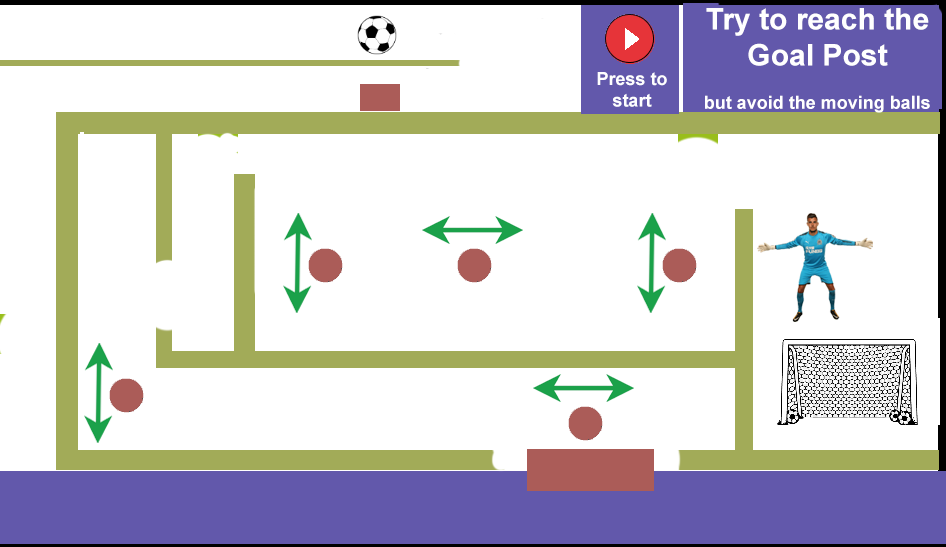
<style>
.page{position:relative;width:946px;height:547px;background:#ffffff}
.page>*{position:absolute;margin:0}
.t1{font:30px "Arial-BoldMT";color:#ffffff}
.t2{font:18px "Arial-BoldMT";color:#ffffff}
.t3{font:18px "Arial-BoldMT";color:#fefeff}
</style>
<div class="page">
<p class="t1" style="left:705px;top:8px;width:225px;height:105px;text-align:center">Try to reach the Goal Post<br><span class="t2"><br>but avoid the moving balls</span></p>
<p class="t3" style="left:597px;top:72px;width:70px;height:35px;text-align:center">Press to start</p>
</div>
